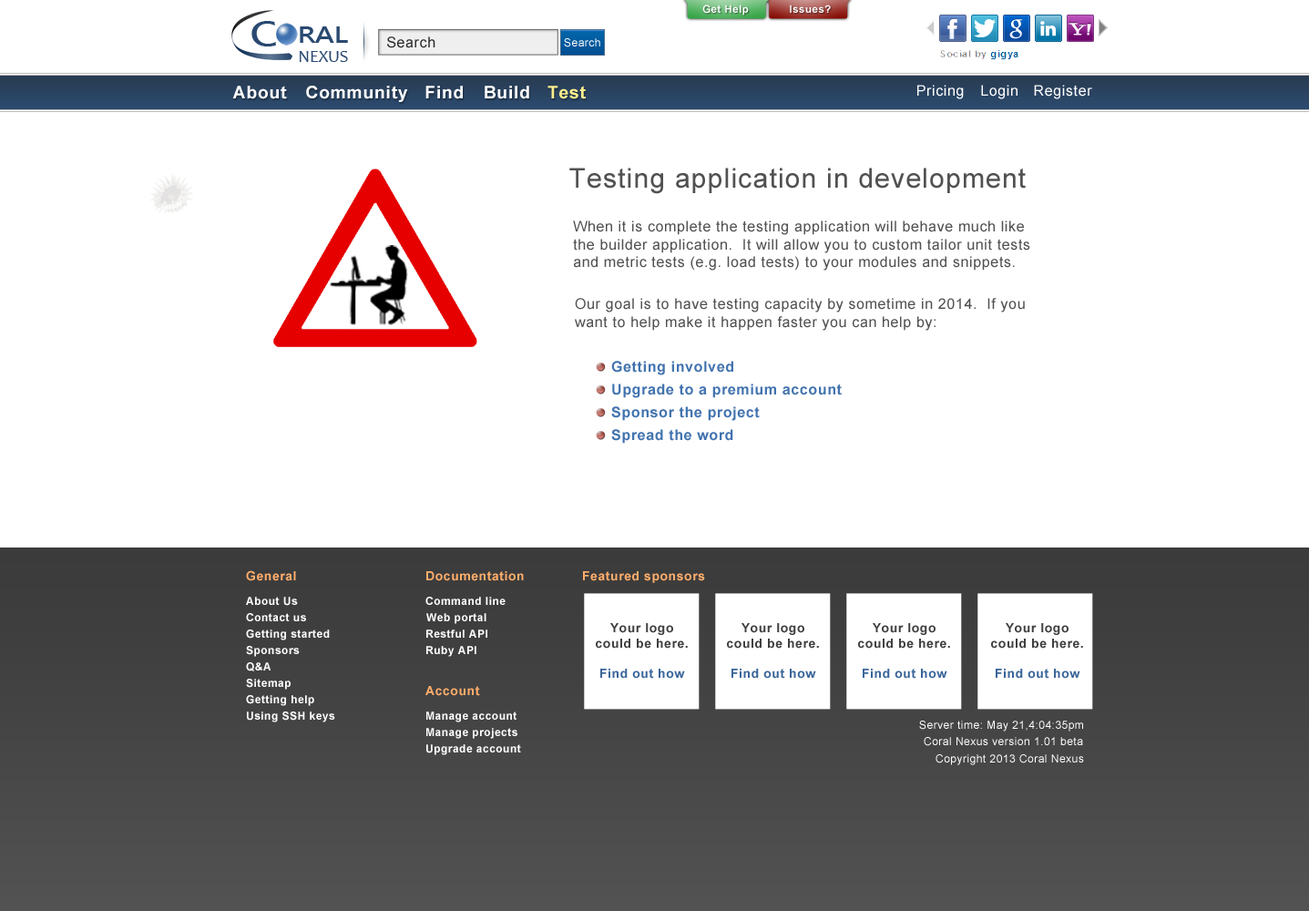
<style>
.page{position:relative;width:1309px;height:911px;background:#ffffff}
.page>*{position:absolute;margin:0}
.t1{font:10.5px "Arial-BoldMT";letter-spacing:0.04em;color:#ffffff}
.t2{font:32.8px "MicrosoftJhengHeiBold";letter-spacing:-0.02em;color:#294970;scale:1.24 1}
.t3{font:21.9px "MicrosoftJhengHeiBold";letter-spacing:-0.02em;color:#294970;scale:1.24 1}
.t4{font:14.6px "ArialMT";letter-spacing:0.04em;color:#2b2b2b}
.t5{font:10.9px "ArialMT";letter-spacing:0.04em;color:#ffffff}
.t6{font:17px "Candara";color:#294970}
.t7{font:17.6px "Arial-BoldMT";letter-spacing:0.04em;color:#ffffff}
.t8{font:17.6px "Arial-BoldMT";letter-spacing:0.04em;color:#feef8d}
.t9{font:14.6px "ArialMT";letter-spacing:0.04em;color:#ffffff}
.t10{font:27.3px "ArialMT";letter-spacing:0.04em;color:#515151}
.t11{font:14.6px "ArialMT";letter-spacing:0.04em;color:#515151}
.t12{font:14.6px "Arial-BoldMT";letter-spacing:0.04em;color:#4273af}
.t13{font:12.8px "Arial-BoldMT";letter-spacing:0.04em;color:#ffad6c}
.t14{font:12.8px "Arial-BoldMT";letter-spacing:0.04em;color:#ffad6b}
.t15{font:10.9px "Arial-BoldMT";letter-spacing:0.04em;color:#ffffff}
.t16{font:12.8px "Arial-BoldMT";letter-spacing:0.04em;color:#404040}
.t17{font:12.8px "Arial-BoldMT";letter-spacing:0.04em;color:#3a6599}
</style>
<div class="page">
<p class="t1" style="left:702px;top:5px;width:47px;height:10px">Get Help</p>
<p class="t1" style="left:790px;top:5px;width:41px;height:8px">Issues?</p>
<p class="t2" style="left:251px;top:21px;width:25px;height:25px">C</p>
<p class="t3" style="left:300px;top:26px;width:48px;height:17px">RAL</p>
<p class="t4" style="left:387px;top:36px;width:48px;height:12px">Search</p>
<p class="t5" style="left:564px;top:38px;width:36px;height:9px">Search</p>
<p class="t6" style="left:299px;top:51px;width:49px;height:11px">NEXUS</p>
<p class="t7" style="left:232px;top:86px;width:55px;height:13px">About</p>
<p class="t7" style="left:306px;top:86px;width:102px;height:16px">Community</p>
<p class="t7" style="left:425px;top:86px;width:38px;height:13px">Find</p>
<p class="t7" style="left:485px;top:86px;width:44px;height:13px">Build</p>
<p class="t8" style="left:547px;top:86px;width:39px;height:13px">Test</p>
<p class="t9" style="left:917px;top:85px;width:47px;height:14px">Pricing</p>
<p class="t9" style="left:981px;top:85px;width:37px;height:14px">Login</p>
<p class="t9" style="left:1034px;top:85px;width:58px;height:14px">Register</p>
<p class="t10" style="left:569px;top:168px;width:457px;height:26px">Testing application in development</p>
<p class="t11" style="left:573px;top:220px;width:457px;height:51px">When it is complete the testing application will behave much like the builder application.  It will allow you to custom tailor unit tests and metric tests (e.g. load tests) to your modules and snippets.</p>
<p class="t11" style="left:575px;top:298px;width:450px;height:33px">Our goal is to have testing capacity by sometime in 2014.  If you want to help make it happen faster you can help by:</p>
<p class="t12" style="left:611px;top:361px;width:122px;height:14px">Getting involved</p>
<p class="t12" style="left:612px;top:384px;width:230px;height:14px">Upgrade to a premium account</p>
<p class="t12" style="left:611px;top:406px;width:149px;height:15px">Sponsor the project</p>
<p class="t12" style="left:611px;top:429px;width:122px;height:15px">Spread the word</p>
<p class="t13" style="left:246px;top:570px;width:50px;height:11px">General</p>
<p class="t14" style="left:426px;top:571px;width:98px;height:10px">Documentation</p>
<p class="t14" style="left:583px;top:571px;width:122px;height:12px">Featured sponsors</p>
<p class="t15" style="left:246px;top:597px;width:52px;height:9px">About Us</p>
<p class="t15" style="left:425px;top:597px;width:81px;height:8px">Command line</p>
<p class="t15" style="left:246px;top:613px;width:60px;height:8px">Contact us</p>
<p class="t15" style="left:426px;top:613px;width:60px;height:11px">Web portal</p>
<p class="t15" style="left:246px;top:629px;width:84px;height:11px">Getting started</p>
<p class="t15" style="left:426px;top:629px;width:61px;height:9px">Restful API</p>
<p class="t16" style="left:596px;top:623px;width:92px;height:56px;text-align:center">Your logo could be here.<br><br><span class="t17">Find out how</span></p>
<p class="t16" style="left:727px;top:623px;width:92px;height:56px;text-align:center">Your logo could be here.<br><br><span class="t17">Find out how</span></p>
<p class="t16" style="left:858px;top:623px;width:92px;height:56px;text-align:center">Your logo could be here.<br><br><span class="t17">Find out how</span></p>
<p class="t16" style="left:991px;top:623px;width:92px;height:56px;text-align:center">Your logo could be here.<br><br><span class="t17">Find out how</span></p>
<p class="t15" style="left:246px;top:646px;width:54px;height:11px">Sponsors</p>
<p class="t15" style="left:426px;top:646px;width:50px;height:11px">Ruby API</p>
<p class="t15" style="left:246px;top:662px;width:25px;height:9px">Q&amp;A</p>
<p class="t15" style="left:246px;top:679px;width:45px;height:11px">Sitemap</p>
<p class="t14" style="left:425px;top:686px;width:55px;height:10px">Account</p>
<p class="t15" style="left:246px;top:695px;width:68px;height:11px">Getting help</p>
<p class="t15" style="left:247px;top:711px;width:88px;height:11px">Using SSH keys</p>
<p class="t15" style="left:426px;top:711px;width:91px;height:11px">Manage account</p>
<p class="t5" style="left:919px;top:721px;width:164px;height:10px">Server time: May 21,4:04:35pm</p>
<p class="t15" style="left:426px;top:728px;width:91px;height:11px">Manage projects</p>
<p class="t5" style="left:924px;top:737px;width:159px;height:9px">Coral Nexus version 1.01 beta</p>
<p class="t15" style="left:426px;top:744px;width:95px;height:11px">Upgrade account</p>
<p class="t5" style="left:936px;top:754px;width:148px;height:11px">Copyright 2013 Coral Nexus</p>
</div>
